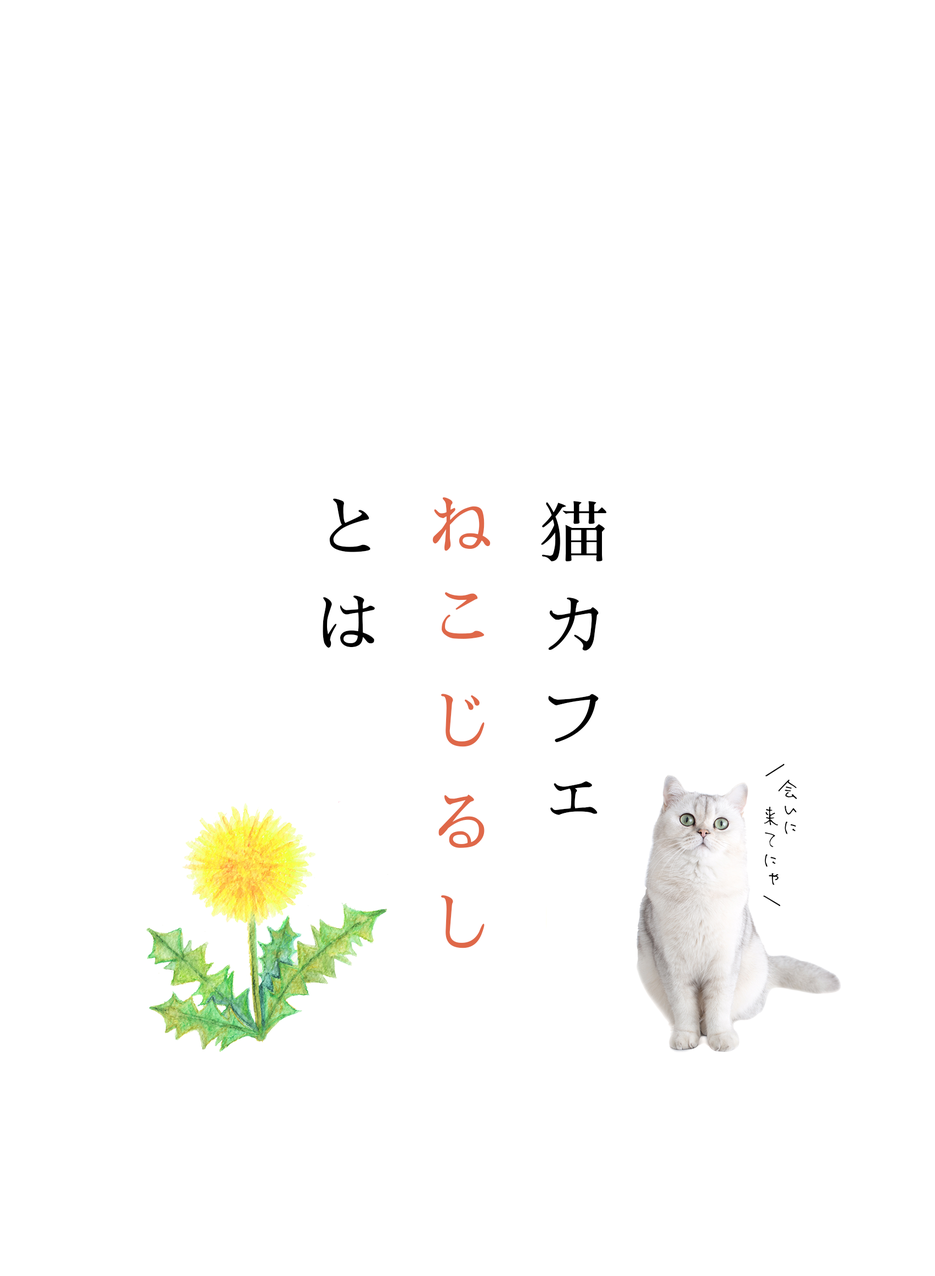
<style>
.page{position:relative;width:935px;height:1276px;background:#ffffff}
.page>*{position:absolute;margin:0}
.t1{font:16.1px/112.4px "SawarabiMincho-Regular";letter-spacing:0.5em;color:#df6849}
.t2{font:16.1px/112.4px "SawarabiMincho-Regular";letter-spacing:0.5em;color:#000000}
</style>
<div class="page">
<p class="t1" style="left:323px;top:497px;width:284px;height:451px"><span class="t2">猫カフェ<br></span>ねこじるし<br><span class="t2">とは</span></p>
</div>
